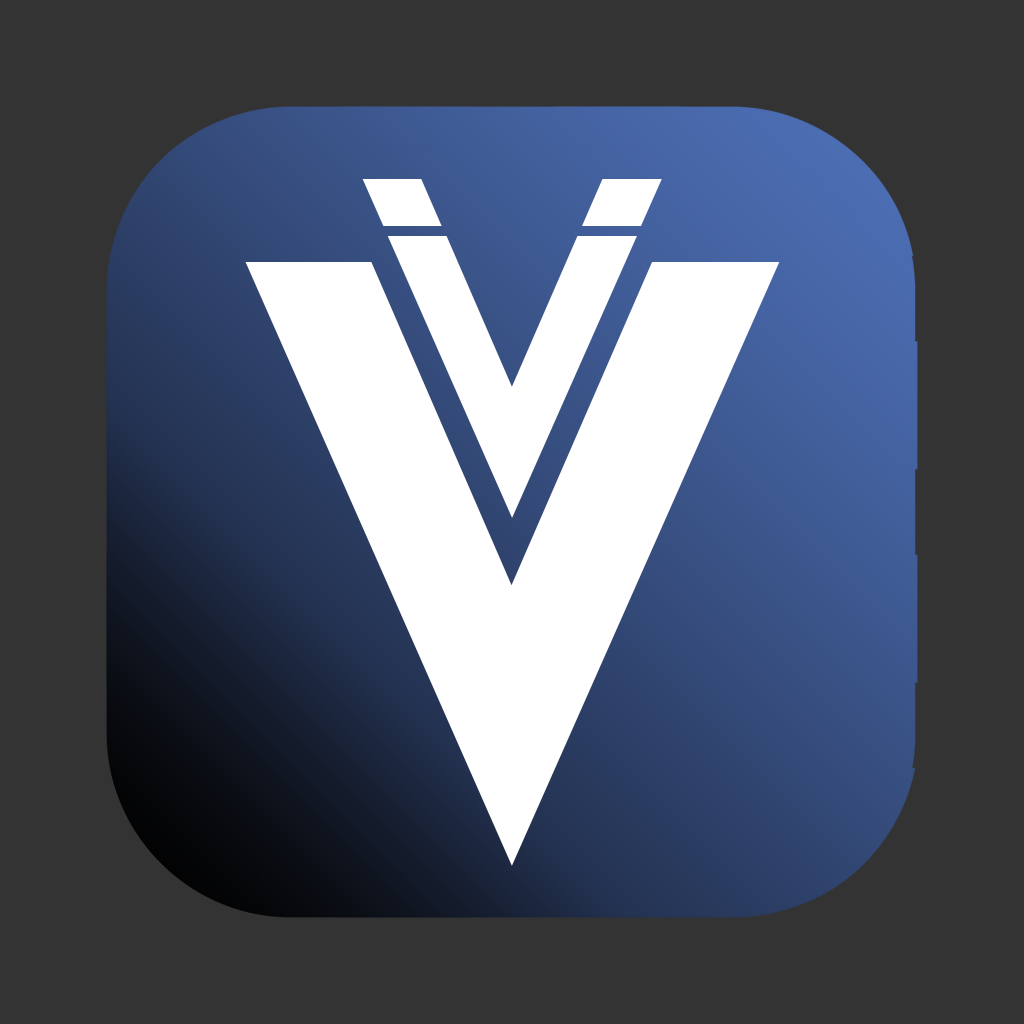
<style>
.page{position:relative;width:1024px;height:1024px;background:#333333}
.page>*{position:absolute;margin:0}
.t1{font:350px "LemonMilk";color:#ffffff}
.t2{font:750px "LemonMilk";color:#ffffff}
</style>
<div class="page">
<p class="t1" style="left:387px;top:236px;width:250px;height:282px">V</p>
<p class="t2" style="left:245px;top:262px;width:535px;height:604px">V</p>
</div>
